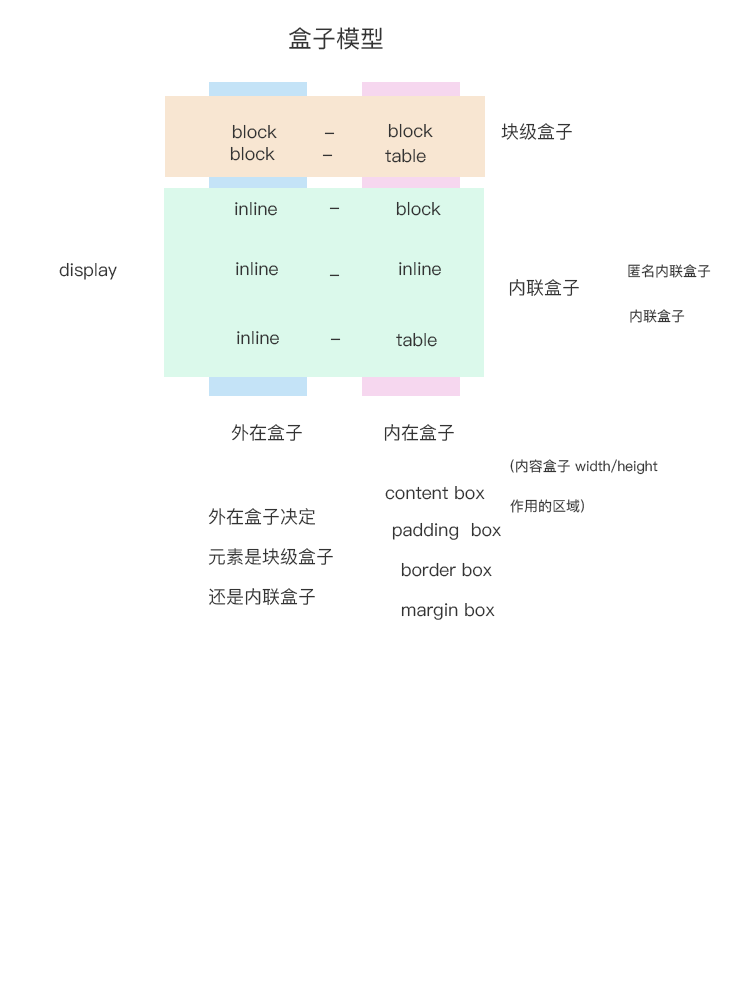
<style>
.page{position:relative;width:749px;height:1000px;background:#ffffff}
.page>*{position:absolute;margin:0}
.t1{font:24px "PingFang-SC-Medium";color:#333333}
.t2{font:18px "PingFang-SC-Medium";color:#333333}
.t3{font:14px "PingFang-SC-Medium";color:#333333}
.t4{font:14px/40px "PingFang-SC-Medium";color:#333333}
.t5{font:18px/40px "PingFang-SC-Medium";color:#333333}
</style>
<div class="page">
<p class="t1" style="left:289px;top:27px;width:94px;height:23px">盒子模型</p>
<p class="t2" style="left:232px;top:124px;width:45px;height:15px">block</p>
<p class="t2" style="left:388px;top:123px;width:45px;height:15px">block</p>
<p class="t2" style="left:501px;top:123px;width:71px;height:17px">块级盒子</p>
<p class="t2" style="left:324px;top:132px;width:11px;height:3px">-</p>
<p class="t2" style="left:230px;top:146px;width:45px;height:15px">block</p>
<p class="t2" style="left:385px;top:148px;width:41px;height:15px">table</p>
<p class="t2" style="left:322px;top:154px;width:11px;height:3px">-</p>
<p class="t2" style="left:235px;top:202px;width:42px;height:14px">inline</p>
<p class="t2" style="left:329px;top:207px;width:11px;height:3px">-</p>
<p class="t2" style="left:396px;top:201px;width:45px;height:15px">block</p>
<p class="t2" style="left:59px;top:262px;width:58px;height:18px">display</p>
<p class="t2" style="left:236px;top:262px;width:42px;height:14px">inline</p>
<p class="t2" style="left:399px;top:262px;width:42px;height:14px">inline</p>
<p class="t3" style="left:628px;top:264px;width:83px;height:14px">匿名内联盒子</p>
<p class="t2" style="left:329px;top:274px;width:11px;height:3px">-</p>
<p class="t2" style="left:509px;top:279px;width:70px;height:17px">内联盒子</p>
<p class="t3" style="left:630px;top:309px;width:55px;height:14px">内联盒子</p>
<p class="t2" style="left:237px;top:331px;width:42px;height:14px">inline</p>
<p class="t2" style="left:330px;top:338px;width:11px;height:3px">-</p>
<p class="t2" style="left:396px;top:332px;width:41px;height:15px">table</p>
<p class="t2" style="left:231px;top:424px;width:71px;height:17px">外在盒子</p>
<p class="t2" style="left:384px;top:424px;width:70px;height:17px">内在盒子</p>
<p class="t4" style="left:510px;top:459px;width:148px;height:54px">(内容盒子 width/height<br>作用的区域)</p>
<p class="t2" style="left:385px;top:486px;width:100px;height:14px">content box</p>
<p class="t5" style="left:208px;top:508px;width:125px;height:97px">外在盒子决定<br>元素是块级盒子<br>还是内联盒子</p>
<p class="t2" style="left:392px;top:522px;width:109px;height:18px">padding  box</p>
<p class="t2" style="left:401px;top:562px;width:91px;height:15px">border box</p>
<p class="t2" style="left:401px;top:603px;width:94px;height:17px">margin box</p>
</div>
